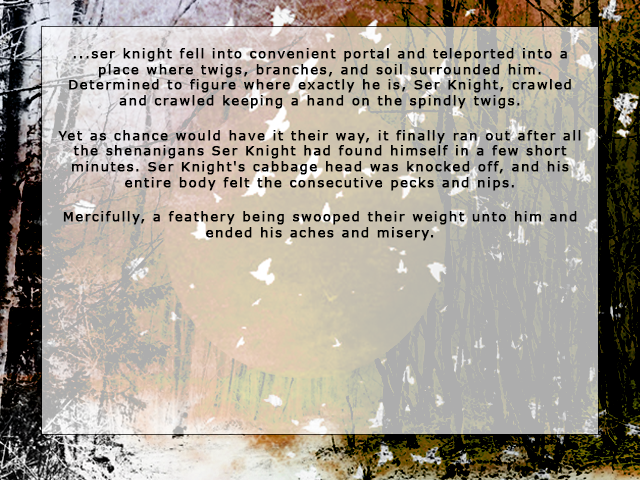
<style>
.page{position:relative;width:640px;height:480px}
.page>*{position:absolute;margin:0}
.t1{font:13px "Verdana";letter-spacing:0.1em;color:#000000;font-weight:bold}
</style>
<div class="page">
<p class="t1" style="left:58px;top:48px;width:523px;height:193px;text-align:center">...ser knight fell into convenient portal and teleported into a place where twigs, branches, and soil surrounded him. Determined to figure where exactly he is, Ser Knight, crawled and crawled keeping a hand on the spindly twigs. <br><br>Yet as chance would have it their way, it finally ran out after all the shenanigans Ser Knight had found himself in a few short minutes. Ser Knight's cabbage head was knocked off, and his entire body felt the consecutive pecks and nips. <br><br>Mercifully, a feathery being swooped their weight unto him and ended his aches and misery.</p>
</div>
